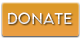
<style>
.page{position:relative;width:81px;height:38px}
.page>*{position:absolute;margin:0}
.t1{font:14px "LEMONMILK-Light";letter-spacing:0.05em;color:#ffffff}
</style>
<div class="page">
<p class="t1" style="left:8px;top:12px;width:64px;height:12px">DONATE</p>
</div>
